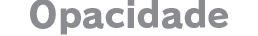
<style>
.page{position:relative;width:258px;height:36px;background:#ffffff}
.page>*{position:absolute;margin:0}
.t1{font:36px "RodinPro-EB";letter-spacing:0.001em;color:#8b8c92}
</style>
<div class="page">
<p class="t1" style="left:30px;top:0px;width:199px;height:35px">Opacidade</p>
</div>
